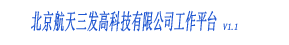
<style>
.page{position:relative;width:289px;height:45px;background:#ffffff}
.page>*{position:absolute;margin:0}
.t1{font:22px "SimSun";letter-spacing:0.075em;color:#1f56d1;font-style:italic;scale:0.49 1}
.t2{font:9.2px "SimSun";letter-spacing:0.075em;color:#1f56d1;font-style:italic}
</style>
<div class="page">
<p class="t1" style="left:31px;top:10px;width:186px;height:22px">北京航天三发高科技有限公司工作平台</p>
<p class="t2" style="left:223px;top:23px;width:15px;height:7px">V1.1</p>
</div>
